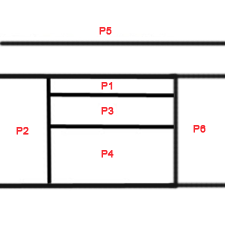
<style>
.page{position:relative;width:225px;height:225px;background:#ffffff}
.page>*{position:absolute;margin:0}
.t1{font:10px "ArialMT";color:#f82a32;text-transform:uppercase;font-weight:bold}
</style>
<div class="page">
<p class="t1" style="left:99px;top:27px;width:13px;height:8px">P5</p>
<p class="t1" style="left:101px;top:82px;width:12px;height:8px">P1</p>
<p class="t1" style="left:101px;top:107px;width:13px;height:8px">P3</p>
<p class="t1" style="left:193px;top:125px;width:13px;height:8px">P6</p>
<p class="t1" style="left:16px;top:127px;width:13px;height:8px">P2</p>
<p class="t1" style="left:101px;top:150px;width:13px;height:8px">P4</p>
</div>
